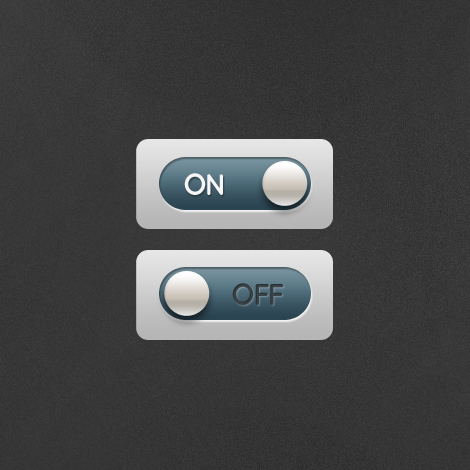
<style>
.page{position:relative;width:470px;height:470px}
.page>*{position:absolute;margin:0}
.t1{font:30px "QuicksandBold-Regular";letter-spacing:-0.15em;color:#f6f6f6}
.t2{font:30px "QuicksandBold-Regular";letter-spacing:-0.15em;color:#394347}
.t3{font:30px "QuicksandBold-Regular";letter-spacing:-0.13em;color:#394347}
</style>
<div class="page">
<p class="t1" style="left:184px;top:173px;width:39px;height:22px">ON</p>
<p class="t2" style="left:232px;top:283px;width:52px;height:22px">O<span class="t3">F</span>F</p>
</div>
